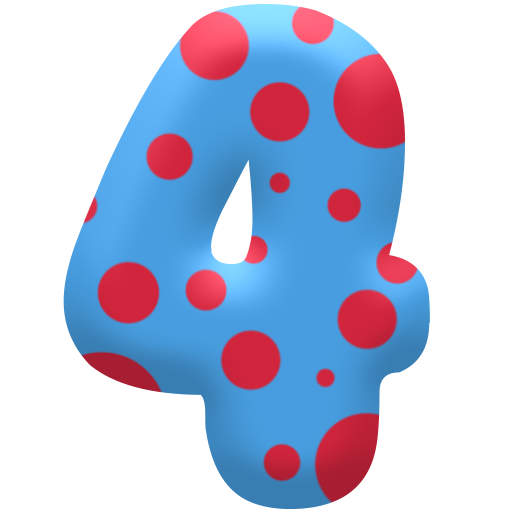
<style>
.page{position:relative;width:512px;height:512px;background:#ffffff}
.page>*{position:absolute;margin:0}
.t1{font:650.7px "BubbleGum"}
</style>
<div class="page">
<p class="t1" style="left:63px;top:4px;width:367px;height:505px">4</p>
</div>
